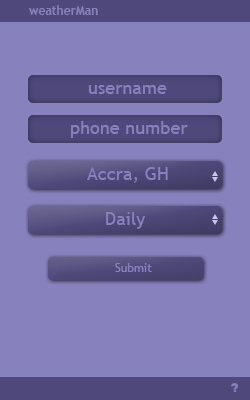
<style>
.page{position:relative;width:250px;height:400px;background:#8781bd}
.page>*{position:absolute;margin:0}
.t1{font:12.5px "TrebuchetMS-Bold";color:#8781bd;scale:0.96 1}
.t2{font:17.9px "TrebuchetMS";color:#8781bd}
.t3{font:12px "TrebuchetMS";color:#8781bd}
</style>
<div class="page">
<p class="t1" style="left:29px;top:5px;width:69px;height:10px">weatherMan</p>
<p class="t2" style="left:88px;top:85px;width:79px;height:9px">username</p>
<p class="t2" style="left:71px;top:121px;width:117px;height:17px">phone number</p>
<p class="t2" style="left:87px;top:167px;width:81px;height:16px">Accra, GH</p>
<p class="t2" style="left:106px;top:212px;width:39px;height:17px">Daily</p>
<p class="t3" style="left:115px;top:263px;width:37px;height:9px">Submit</p>
</div>
